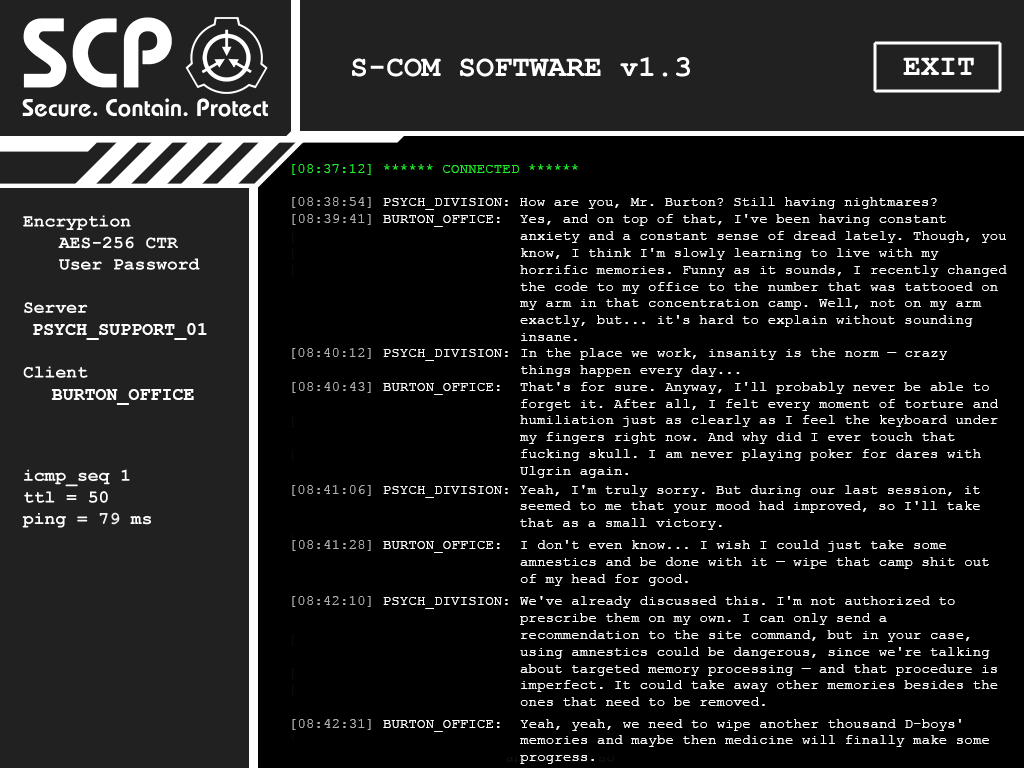
<style>
.page{position:relative;width:1024px;height:768px;background:#000000}
.page>*{position:absolute;margin:0}
.t1{font:14px "CourierNewPSMT";letter-spacing:0.01em;color:#1fec2a}
.t2{font:14px "CourierNewPSMT";letter-spacing:0.01em;color:#ffffff}
.t3{font:14px "CourierNewPSMT";letter-spacing:0.01em;color:#aeacac}
.t4{font:18px "CourierNewPS-BoldMT";letter-spacing:0.01em;color:#ffffff;text-transform:uppercase}
.t5{font:14px "CourierNewPSMT";letter-spacing:0.01em;color:#afaeae}
.t6{font:14px "CourierNewPSMT";letter-spacing:0.01em;color:#afadad}
.t7{font:14px "CourierNewPSMT";letter-spacing:0.01em;color:#b1b0b0}
</style>
<div class="page">
<p class="t1" style="left:292px;top:164px;width:286px;height:11px">[08:37:12] ****** CONNECTED ******</p>
<p class="t2" style="left:292px;top:197px;width:216px;height:13px"><span class="t3">[08:38:54]</span> PSYCH_DIVISION:</p>
<p class="t2" style="left:520px;top:197px;width:417px;height:12px"><span class="t1"> </span>How are you, Mr. Burton? Still having nightmares?</p>
<p class="t2" style="left:292px;top:214px;width:208px;height:13px"><span class="t3">[08:39:41]</span> BURTON_OFFICE:</p>
<p class="t2" style="left:520px;top:214px;width:487px;height:127px">Yes, and on top of that, I've been having constant anxiety and a constant sense of dread lately. Though, you know, I think I'm slowly learning to live with my horrific memories. Funny as it sounds, I recently changed the code to my office to the number that was tattooed on my arm in that concentration camp. Well, not on my arm exactly, but... it's hard to explain without sounding insane.</p>
<p class="t4" style="left:33px;top:323px;width:174px;height:17px">Psych_support_01</p>
<p class="t2" style="left:292px;top:348px;width:216px;height:13px"><span class="t5">[08:40:12]</span> PSYCH_DIVISION:</p>
<p class="t2" style="left:521px;top:348px;width:426px;height:29px">In the place we work, insanity is the norm — crazy things happen every day...</p>
<p class="t4" style="left:51px;top:389px;width:143px;height:16px">BURTON_OFFICE</p>
<p class="t2" style="left:292px;top:382px;width:208px;height:13px"><span class="t5">[08:40:43]</span> BURTON_OFFICE:</p>
<p class="t2" style="left:520px;top:382px;width:478px;height:96px">That's for sure. Anyway, I'll probably never be able to forget it. After all, I felt every moment of torture and humiliation just as clearly as I feel the keyboard under my fingers right now. And why did I ever touch that fucking skull. I am never playing poker for dares with Ulgrin again.</p>
<p class="t2" style="left:292px;top:485px;width:216px;height:13px"><span class="t5">[08:41:06]</span> PSYCH_DIVISION:</p>
<p class="t2" style="left:520px;top:485px;width:460px;height:45px">Yeah, I'm truly sorry. But during our last session, it seemed to me that your mood had improved, so I'll take that as a small victory.</p>
<p class="t2" style="left:292px;top:540px;width:208px;height:13px"><span class="t5">[08:41:28]</span> BURTON_OFFICE:</p>
<p class="t2" style="left:520px;top:540px;width:469px;height:46px">I don't even know... I wish I could just take some amnestics and be done with it — wipe that camp shit out of my head for good.</p>
<p class="t2" style="left:292px;top:596px;width:216px;height:13px"><span class="t6">[08:42:10]</span> PSYCH_DIVISION:</p>
<p class="t2" style="left:520px;top:596px;width:478px;height:110px">We've already discussed this. I'm not authorized to prescribe them on my own. I can only send a recommendation to the site command, but in your case, using amnestics could be dangerous, since we're talking about targeted memory processing — and that procedure is imperfect. It could take away other memories besides the ones that need to be removed.</p>
<p class="t2" style="left:292px;top:719px;width:208px;height:13px"><span class="t7">[08:42:31]</span> BURTON_OFFICE:</p>
<p class="t2" style="left:520px;top:719px;width:469px;height:45px">Yeah, yeah, we need to wipe another thousand D-boys' memories and maybe then medicine will finally make some progress.</p>
</div>
